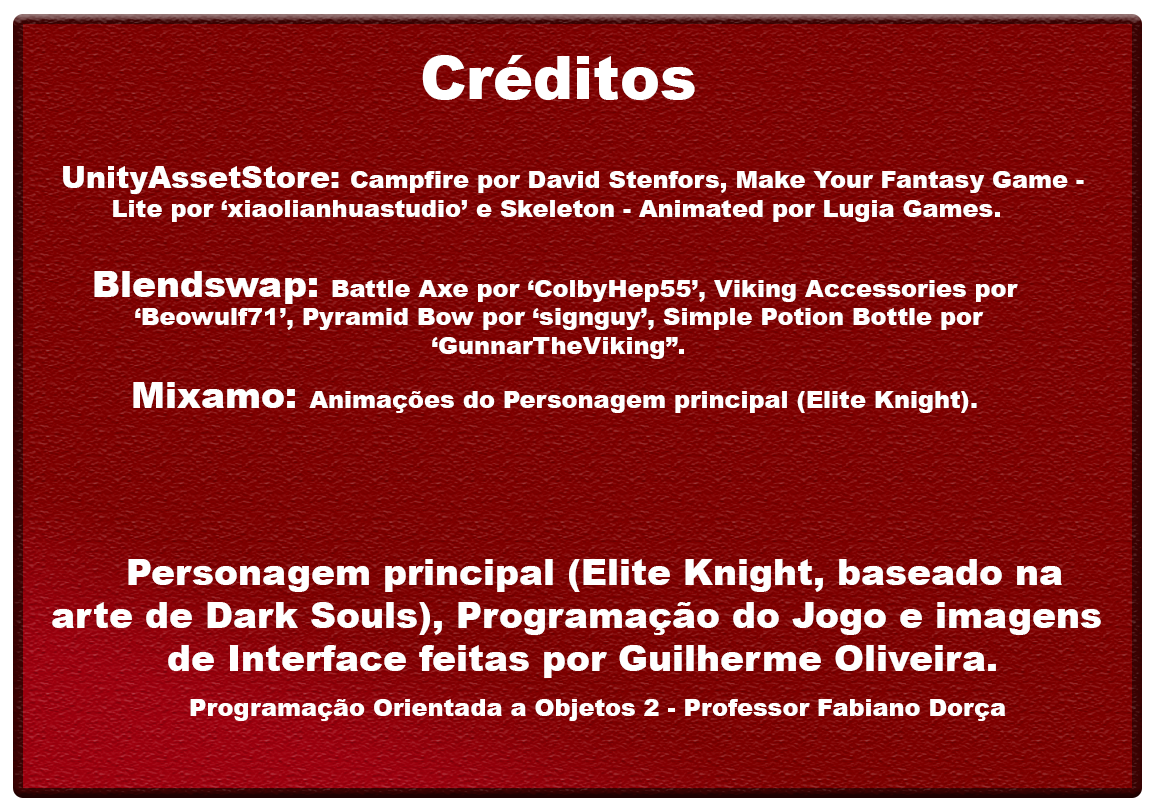
<style>
.page{position:relative;width:1162px;height:812px}
.page>*{position:absolute;margin:0}
.t1{font:60px "Arial-Black";color:#ffffff}
.t2{font:24px "Arial-Black";color:#ffffff}
.t3{font:30px "Arial-Black";color:#ffffff}
.t4{font:36px "Arial-Black";color:#ffffff}
</style>
<div class="page">
<p class="t1" style="left:422px;top:55px;width:273px;height:45px">Créditos</p>
<p class="t2" style="left:63px;top:166px;width:1021px;height:56px;text-align:center"><span class="t3"> UnityAssetStore: </span>Campfire por David Stenfors, Make Your Fantasy Game - <br>Lite por ‘xiaolianhuastudio’ e Skeleton - Animated por Lugia Games.</p>
<p class="t2" style="left:94px;top:271px;width:924px;height:88px;text-align:center"><span class="t4">Blendswap: </span>Battle Axe por ‘ColbyHep55’, Viking Accessories por <br>‘Beowulf71’, Pyramid Bow por ‘signguy’, Simple Potion Bottle por<br>‘GunnarTheViking”.</p>
<p class="t2" style="left:133px;top:382px;width:844px;height:31px"><span class="t4">Mixamo: </span>Animações do Personagem principal (Elite Knight).</p>
<p class="t4" style="left:52px;top:559px;width:1049px;height:119px;text-align:center">Personagem principal (Elite Knight, baseado na <br>arte de Dark Souls), Programação do Jogo e imagens <br>de Interface feitas por Guilherme Oliveira.</p>
<p class="t2" style="left:190px;top:699px;width:816px;height:22px">Programação Orientada a Objetos 2 - Professor Fabiano Dorça</p>
</div>
